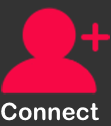
<style>
.page{position:relative;width:111px;height:126px;background:#333333}
.page>*{position:absolute;margin:0}
.t1{font:24px "ArialRoundedMTBold";color:#fefefe}
</style>
<div class="page">
<p class="t1" style="left:1px;top:102px;width:98px;height:19px">Connect</p>
</div>
